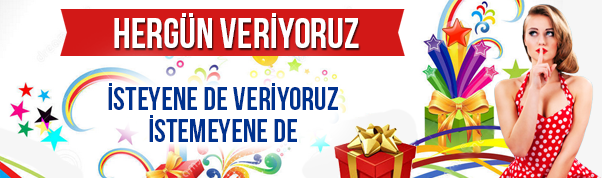
<style>
.page{position:relative;width:602px;height:178px;background:#ffffff}
.page>*{position:absolute;margin:0}
.t1{font:42px "BebasNeue";color:#ffffff;text-transform:uppercase}
.t2{font:32px/20px "BebasNeue";color:#00328e;text-transform:uppercase}
</style>
<div class="page">
<p class="t1" style="left:114px;top:13px;width:245px;height:35px">HERGÜN VERİYORUZ</p>
<p class="t2" style="left:108px;top:83px;width:230px;height:59px;text-align:center">İSTEYENE DE VERİYORUZ<br>İSTEMEYENE DE</p>
</div>
